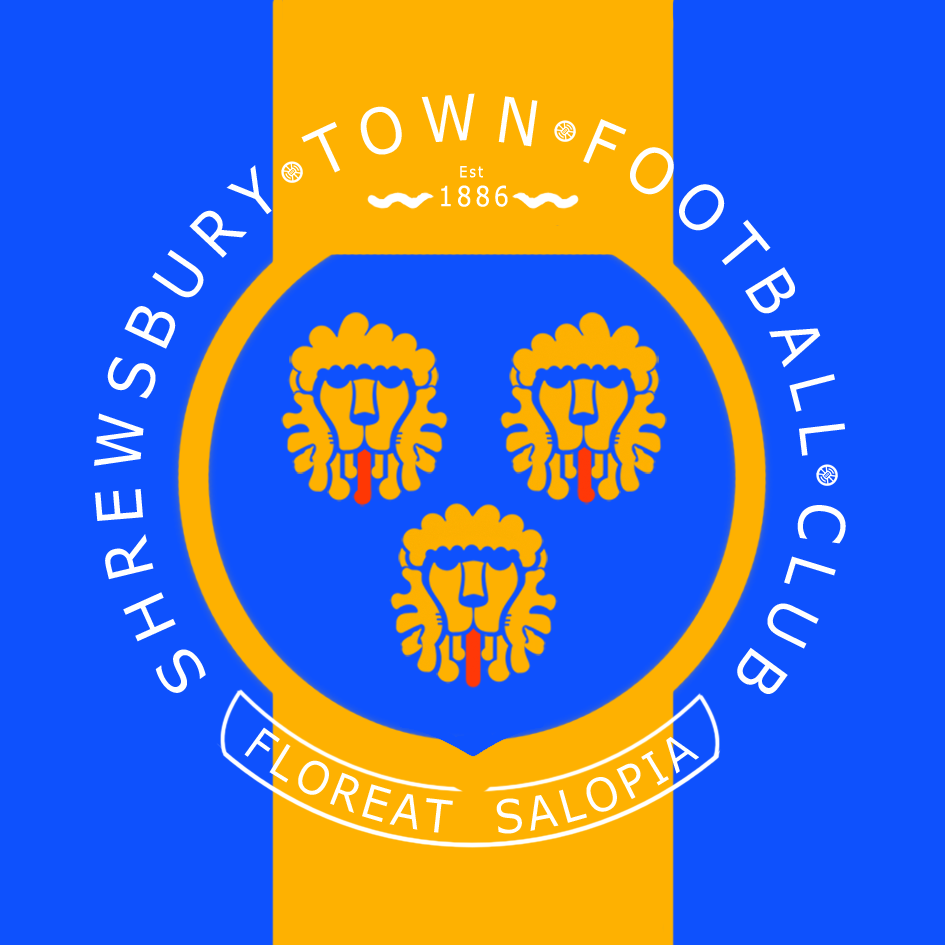
<style>
.page{position:relative;width:945px;height:945px;background:#0e51fd}
.page>*{position:absolute;margin:0}
.t1{font:63.1px "Verdana";letter-spacing:0.162em;color:#ffffff;scale:0.94 1}
.t2{font:57.4px "Verdana";letter-spacing:0.162em;color:#ffffff;scale:1.11 1}
.t3{font:15.3px "Verdana";letter-spacing:0.16em;color:#ffffff;scale:0.84 1}
.t4{font:27.8px "Verdana";letter-spacing:0.16em;color:#ffffff;scale:0.84 1}
.t5{font:45.8px "Verdana";letter-spacing:0.122em;color:#ffffff;scale:0.94 1}
</style>
<div class="page">
<p class="t1" style="left:94px;top:93px;width:752px;height:601px"><span class="t2">  SH</span>REWSBURY TOWN FOOTBALL CLUB</p>
<p class="t3" style="left:460px;top:166px;width:23px;height:12px">Est</p>
<p class="t4" style="left:441px;top:185px;width:67px;height:22px">1886</p>
<p class="t5" style="left:244px;top:727px;width:455px;height:107px">FLOREAT  SALOPIA</p>
</div>
